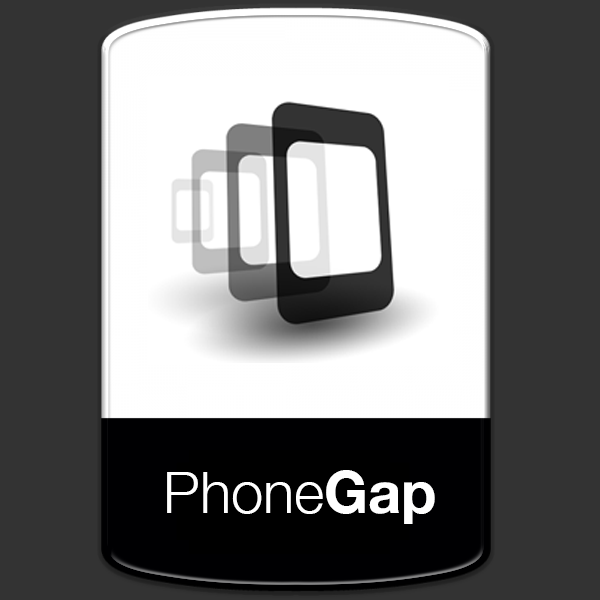
<style>
.page{position:relative;width:600px;height:600px;background:#333333}
.page>*{position:absolute;margin:0}
.t1{font:57.8px "HelveticaNeue-Light";color:#ffffff}
.t2{font:57.8px "HelveticaNeue-Bold";color:#ffffff}
</style>
<div class="page">
<p class="t1" style="left:167px;top:470px;width:268px;height:54px">Phone<span class="t2">Gap</span></p>
</div>
